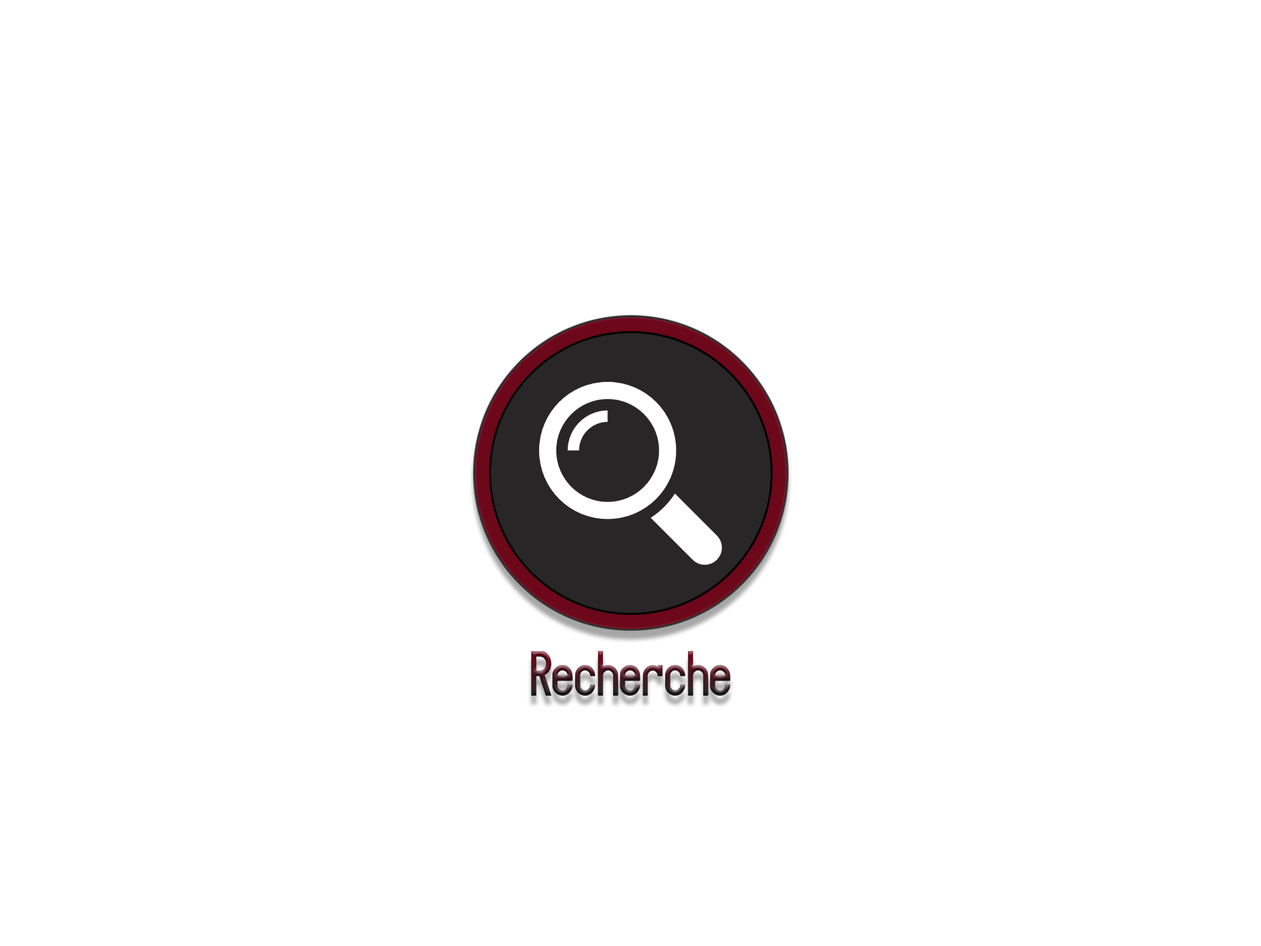
<style>
.page{position:relative;width:1261px;height:946px;background:#ffffff}
.page>*{position:absolute;margin:0}
.t1{font:55.6px "Targa";scale:0.9 1}
</style>
<div class="page">
<p class="t1" style="left:531px;top:651px;width:200px;height:44px">Recherche</p>
</div>
